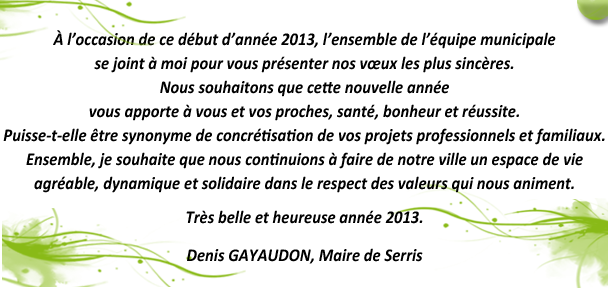
<style>
.page{position:relative;width:608px;height:288px;background:#ffffff}
.page>*{position:absolute;margin:0}
.t1{font:18px/24px "Calibri-BoldItalic";color:#000000;scale:0.92 1}
.t2{font:18px "Calibri-BoldItalic";color:#000000;scale:0.92 1}
</style>
<div class="page">
<p class="t1" style="left:3px;top:30px;width:602px;height:234px;text-align:center">À l’occasion de ce début d’année 2013, l’ensemble de l’équipe municipale<br>se joint à moi pour vous présenter nos vœux les plus sincères.<br>Nous souhaitons que cette nouvelle année<br>vous apporte à vous et vos proches, santé, bonheur et réussite.<br>Puisse-t-elle être synonyme de concrétisation de vos projets professionnels et familiaux.<br>Ensemble, je souhaite que nous continuions à faire de notre ville un espace de vie<br>agréable, dynamique et solidaire dans le respe<span class="t2">ct des valeurs qui nous animent.<br><br>Très belle et heureuse année 2013.<br><br>Denis GAYAUDON, Maire de Serris</span></p>
</div>
